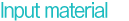
<style>
.page{position:relative;width:129px;height:21px;background:#ffffff}
.page>*{position:absolute;margin:0}
.t1{font:20px "GothicMB101Pro-Regular";letter-spacing:-0.06em;color:#1dbcc0;scale:0.9 1}
</style>
<div class="page">
<p class="t1" style="left:1px;top:2px;width:107px;height:19px">Input material</p>
</div>
